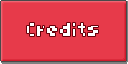
<style>
.page{position:relative;width:128px;height:64px;background:#e73a4a}
.page>*{position:absolute;margin:0}
.t1{font:20px "04b03";color:#ffffff}
</style>
<div class="page">
<p class="t1" style="left:27px;top:23px;width:71px;height:13px">Credits</p>
</div>
